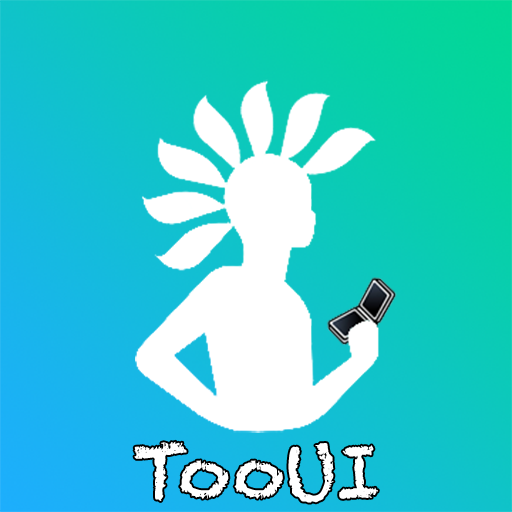
<style>
.page{position:relative;width:512px;height:512px}
.page>*{position:absolute;margin:0}
.t1{font:72px "Chalkduster";color:#ffffff}
</style>
<div class="page">
<p class="t1" style="left:134px;top:441px;width:244px;height:62px">TooUI</p>
</div>
